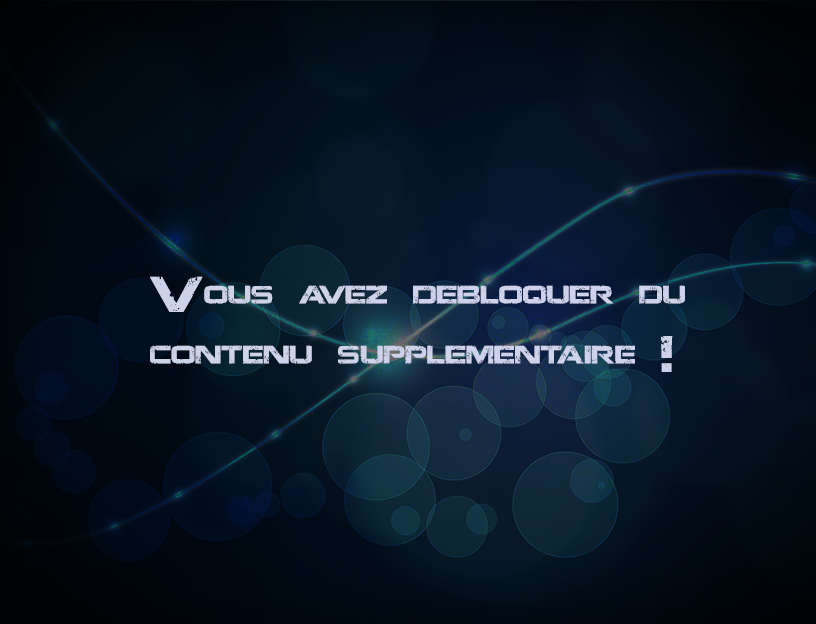
<style>
.page{position:relative;width:816px;height:624px}
.page>*{position:absolute;margin:0}
.t1{font:50px "JacintoSans";color:#ced2ea}
</style>
<div class="page">
<p class="t1" style="left:150px;top:276px;width:535px;height:96px">Vous avez debloquer du contenu supplementaire !</p>
</div>
